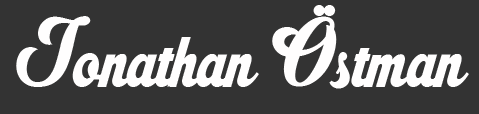
<style>
.page{position:relative;width:479px;height:114px;background:#333333}
.page>*{position:absolute;margin:0}
.t1{font:96px "RistellaPERSONALUSEONLY";color:#fffefe}
</style>
<div class="page">
<p class="t1" style="left:16px;top:5px;width:453px;height:84px">Jonathan Östman</p>
</div>
